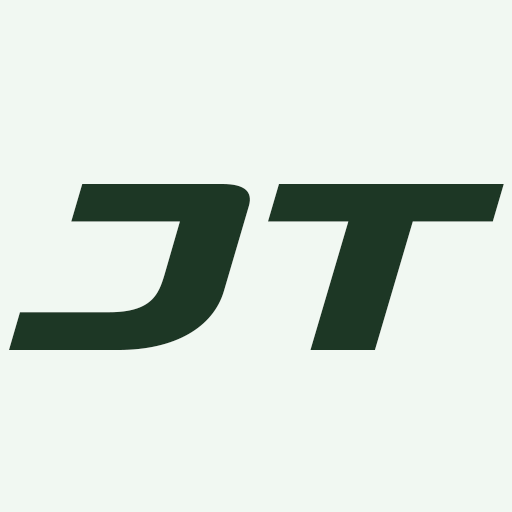
<style>
.page{position:relative;width:512px;height:512px;background:#f1f8f2}
.page>*{position:absolute;margin:0}
.t1{font:236px "PPNeueMachina-InktrapUltraboldItalic";color:#1d3725;scale:1.5 1}
</style>
<div class="page">
<p class="t1" style="left:9px;top:184px;width:495px;height:166px">JT</p>
</div>
